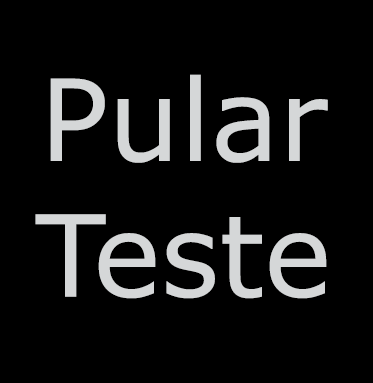
<style>
.page{position:relative;width:373px;height:383px;background:#000000}
.page>*{position:absolute;margin:0}
.t1{font:113.1px "Verdana";color:#d5d7d8}
</style>
<div class="page">
<p class="t1" style="left:35px;top:74px;width:293px;height:225px;text-align:center">Pular<br>Teste</p>
</div>
